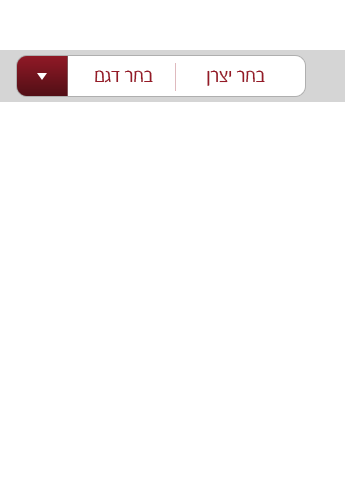
<style>
.page{position:relative;width:356px;height:504px;background:#ffffff}
.page>*{position:absolute;margin:0}
.t1{font:18.7px "FbExtaza-Regular";letter-spacing:-0.02em;color:#951a27}
</style>
<div class="page">
<p class="t1" style="left:95px;top:70px;width:58px;height:13px">בחר דגם</p>
<p class="t1" style="left:207px;top:70px;width:58px;height:16px">בחר יצרן</p>
</div>
